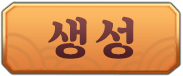
<style>
.page{position:relative;width:183px;height:76px}
.page>*{position:absolute;margin:0}
.t1{font:46.1px "SDKukdetopokki-bBd";letter-spacing:0.12em}
</style>
<div class="page">
<p class="t1" style="left:48px;top:16px;width:86px;height:43px">생성</p>
</div>
